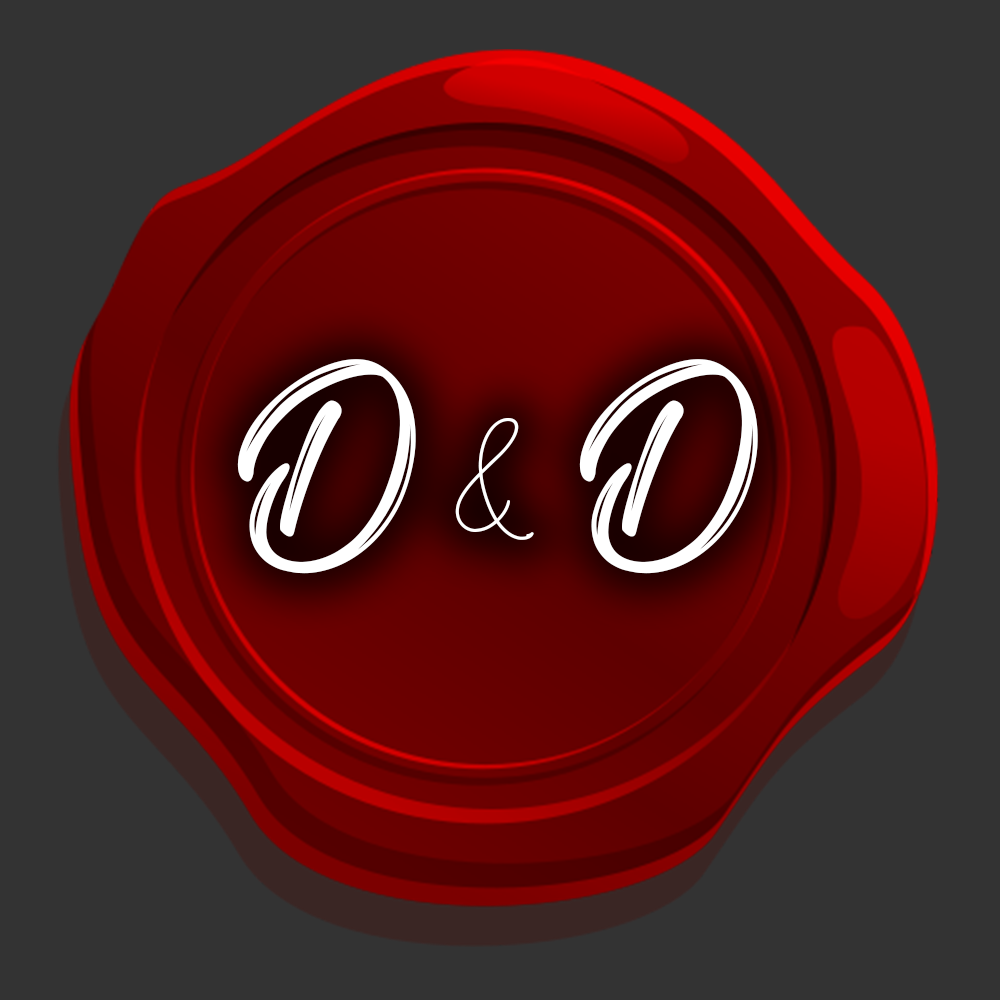
<style>
.page{position:relative;width:1000px;height:1000px;background:#333333}
.page>*{position:absolute;margin:0}
.t1{font:200px "Amazing-Kids";letter-spacing:-0.01em;color:#ffffff}
.t2{font:200px "SillyGirls";letter-spacing:-0.01em;color:#ffffff}
</style>
<div class="page">
<p class="t1" style="left:237px;top:359px;width:521px;height:215px">D <span class="t2">&amp;</span> D</p>
</div>
